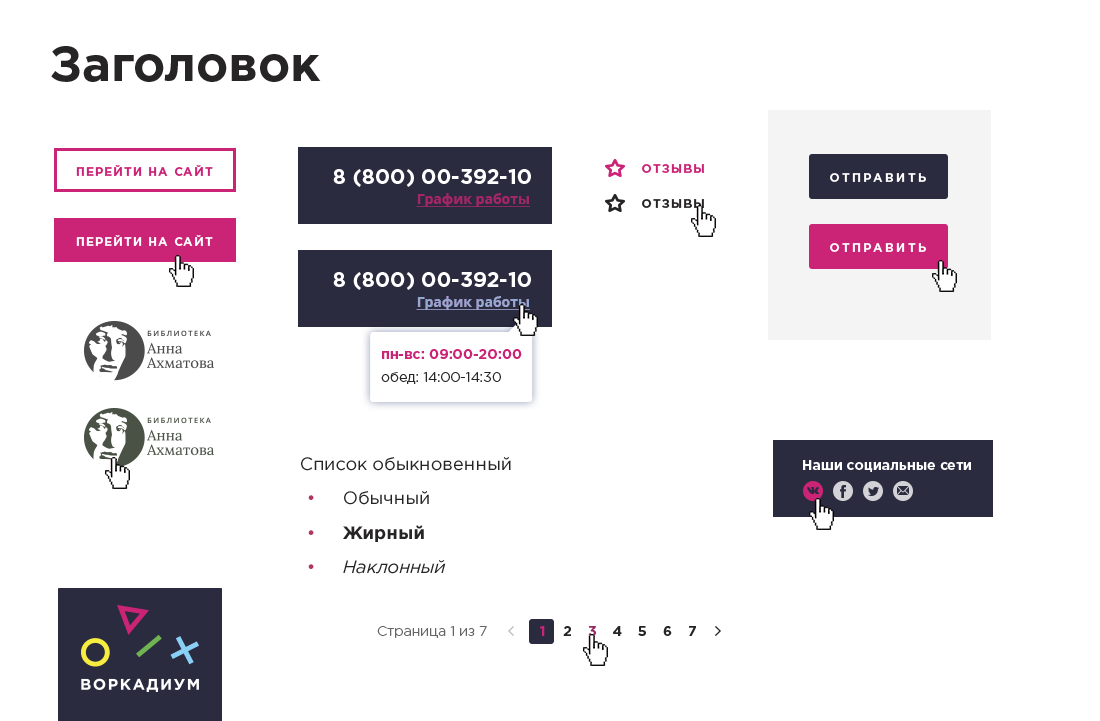
<style>
.page{position:relative;width:1100px;height:721px;background:#ffffff}
.page>*{position:absolute;margin:0}
.t1{font:49px "GothamPro-Bold";color:#262424}
.t2{font:12px "GothamPro-Bold";letter-spacing:0.1em;color:#cb2376;text-transform:uppercase}
.t3{font:21px "GothamPro-Bold";color:#ffffff;text-transform:uppercase}
.t4{font:12px "GothamPro-Bold";letter-spacing:0.2em;color:#ffffff;text-transform:uppercase}
.t5{font:14px "OpenSans-Bold";color:#a52568;text-decoration:underline}
.t6{font:12px "GothamPro-Bold";letter-spacing:0.1em;color:#262424;text-transform:uppercase}
.t7{font:12px "GothamPro-Bold";letter-spacing:0.1em;color:#ffffff;text-transform:uppercase}
.t8{font:14px "OpenSans-Bold";color:#92a8d1;text-decoration:underline}
.t9{font:14px/18px "GothamPro-Bold";color:#cb2376}
.t10{font:14px/18px "GothamPro-Light";color:#262424}
.t11{font:18px/30px "GothamPro";color:#262424}
.t12{font:18px/30px "GothamPro";color:#b03664}
.t13{font:18px/30px "GothamPro-Bold";color:#262424}
.t14{font:18px/30px "GothamPro-Italic";color:#262424}
.t15{font:14px "GothamPro-Bold";color:#ffffff}
.t16{font:14px "GothamPro-Light";color:#656464}
.t17{font:14px "GothamPro-Bold";color:#cb2376}
.t18{font:14px "GothamPro-Bold";color:#262424}
.t19{font:14px "GothamPro-Bold";color:#952663}
</style>
<div class="page">
<p class="t1" style="left:51px;top:46px;width:270px;height:36px">Заголовок</p>
<p class="t2" style="left:76px;top:165px;width:137px;height:11px">Перейти на сайт</p>
<p class="t3" style="left:333px;top:169px;width:198px;height:18px">8 (800) 00-392-10</p>
<p class="t2" style="left:642px;top:164px;width:62px;height:9px">Отзывы</p>
<p class="t4" style="left:830px;top:173px;width:96px;height:9px">Отправить</p>
<p class="t5" style="left:416px;top:193px;width:114px;height:14px">График работы</p>
<p class="t6" style="left:642px;top:199px;width:62px;height:9px">Отзывы</p>
<p class="t7" style="left:76px;top:235px;width:137px;height:11px">Перейти на сайт</p>
<p class="t4" style="left:830px;top:243px;width:96px;height:9px">Отправить</p>
<p class="t3" style="left:333px;top:272px;width:198px;height:18px">8 (800) 00-392-10</p>
<p class="t8" style="left:416px;top:296px;width:114px;height:14px">График работы</p>
<p class="t8" style="left:416px;top:296px;width:114px;height:14px">График работы</p>
<p class="t9" style="left:381px;top:349px;width:141px;height:35px">пн-вс: 09:00-20:00<br><span class="t10">обед: 14:00-14:30</span></p>
<p class="t11" style="left:301px;top:457px;width:210px;height:117px;text-align:center">Cписок обыкновенный<br><span class="t12">•</span>     Обычный <br><span class="t12">•     </span><span class="t13">Жирный<br></span><span class="t12">•     </span><span class="t14">Наклонный</span></p>
<p class="t15" style="left:803px;top:460px;width:168px;height:12px">Наши социальные сети</p>
<p class="t16" style="left:377px;top:626px;width:110px;height:12px">Страница 1 из 7</p>
<p class="t17" style="left:540px;top:626px;width:5px;height:10px">1</p>
<p class="t18" style="left:563px;top:626px;width:8px;height:10px">2</p>
<p class="t19" style="left:588px;top:626px;width:8px;height:10px">3</p>
<p class="t18" style="left:613px;top:626px;width:9px;height:10px">4</p>
<p class="t18" style="left:638px;top:626px;width:8px;height:10px">5</p>
<p class="t18" style="left:663px;top:626px;width:9px;height:10px">6</p>
<p class="t18" style="left:689px;top:626px;width:7px;height:10px">7</p>
</div>
